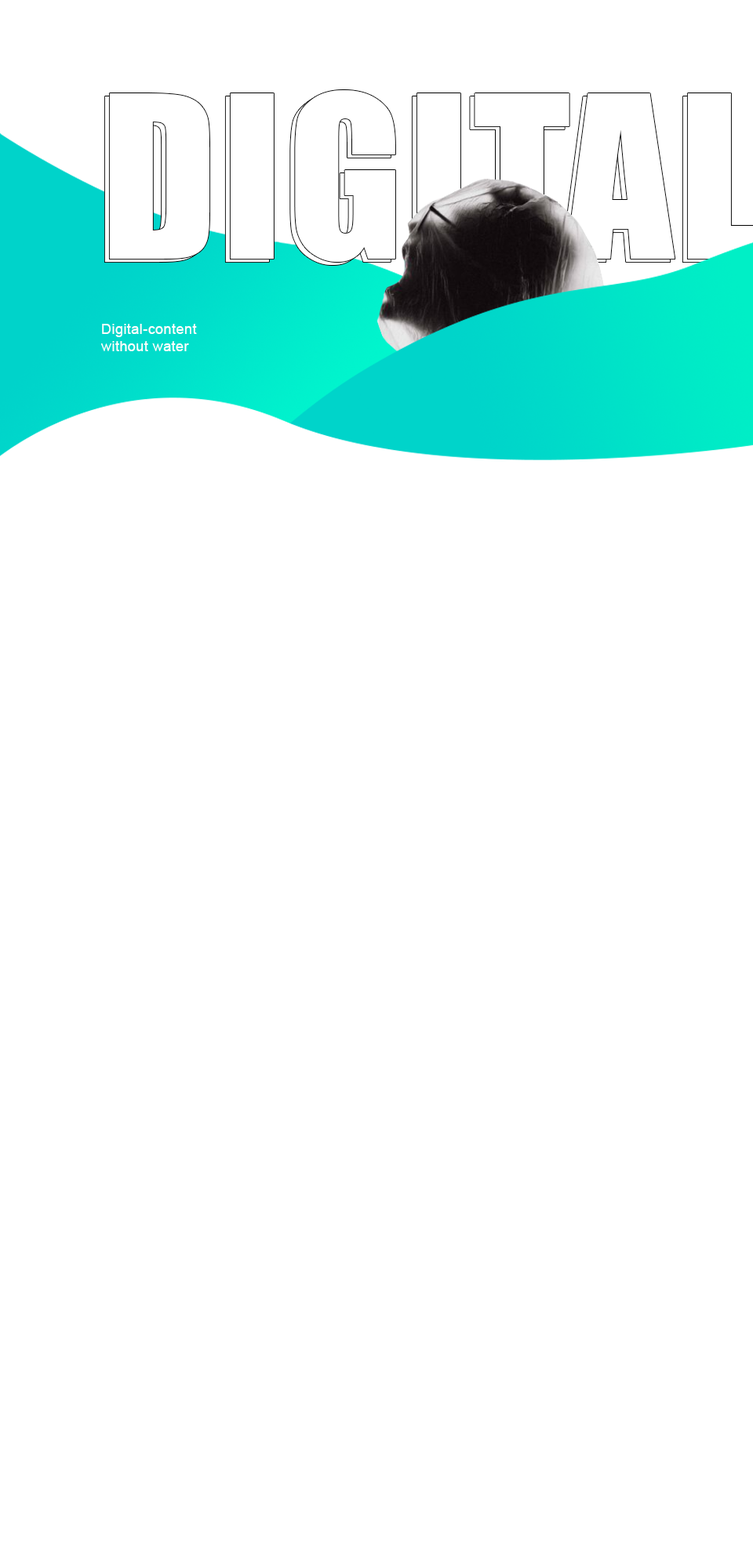
<style>
.page{position:relative;width:753px;height:1568px;background:#ffffff}
.page>*{position:absolute;margin:0}
.t1{font:14.1px "ArialMT";letter-spacing:0.025em;color:#ffffff}
</style>
<div class="page">
<p class="t1" style="left:101px;top:324px;width:96px;height:27px">Digital-content without water</p>
</div>
